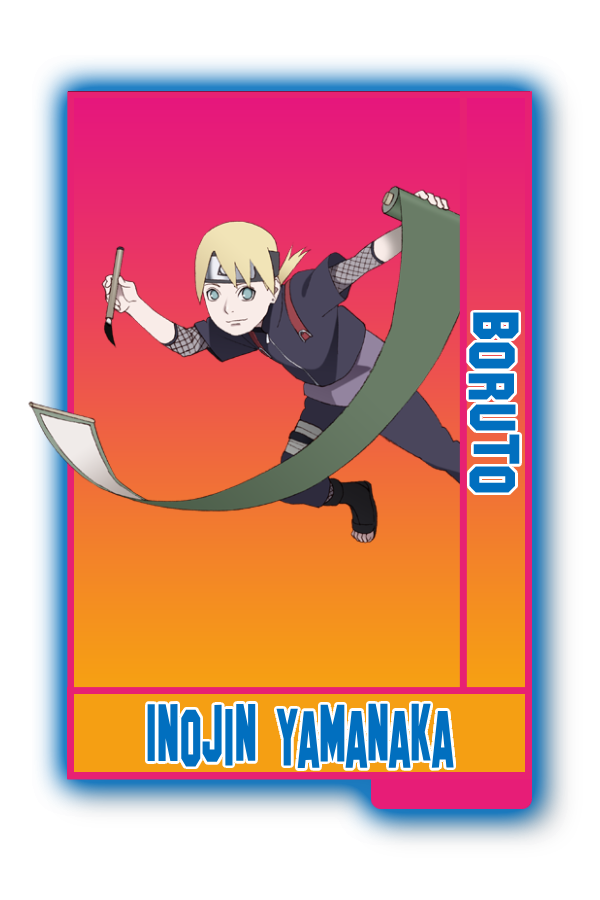
<style>
.page{position:relative;width:600px;height:900px;background:#ffffff}
.page>*{position:absolute;margin:0}
.t1{font:64.7px "SFHollywoodHills";color:#016fbf}
.t2{font:81.1px "SFHollywoodHills";color:#016fbf;scale:0.58 1}
</style>
<div class="page">
<p class="t1" style="left:468px;top:312px;width:52px;height:181px;rotate:90deg">Boruto</p>
<p class="t2" style="left:147px;top:703px;width:307px;height:65px">Inojin Yamanaka</p>
</div>
